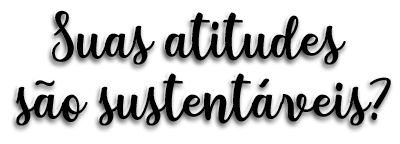
<style>
.page{position:relative;width:400px;height:144px;background:#ffffff}
.page>*{position:absolute;margin:0}
.t1{font:70.4px/60.1px "yellosun"}
.t2{font:70.4px/60.1px "yellosun";color:#000000}
</style>
<div class="page">
<p class="t1" style="left:15px;top:8px;width:375px;height:115px;text-align:center">Suas atitudes <br>são sustentáveis?</p>
<p class="t2" style="left:16px;top:10px;width:375px;height:116px;text-align:center">Suas atitudes <br>são sustentáveis?</p>
</div>
